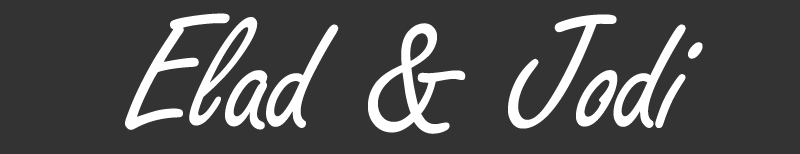
<style>
.page{position:relative;width:800px;height:154px;background:#333333}
.page>*{position:absolute;margin:0}
.t1{font:175px "FreestyleScript-Regular";letter-spacing:-0.01em;color:#ffffff}
</style>
<div class="page">
<p class="t1" style="left:125px;top:13px;width:578px;height:121px">Elad &amp; Jodi</p>
</div>
